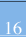
<style>
.page{position:relative;width:26px;height:37px;background:#82b5e8}
.page>*{position:absolute;margin:0}
.t1{font:18px "Times-Roman";color:#ffffff}
</style>
<div class="page">
<p class="t1" style="left:6px;top:21px;width:16px;height:14px">16</p>
</div>
